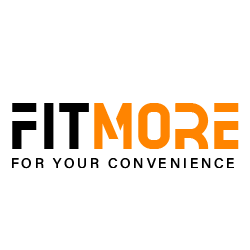
<style>
.page{position:relative;width:250px;height:250px;background:#ffffff}
.page>*{position:absolute;margin:0}
.t1{font:77.7px "ACETONE";color:#ff8400}
.t2{font:77.7px "ACETONE";color:#000000}
.t3{font:14px "AcuminConcept-Regular";letter-spacing:0.2em;color:#000000}
</style>
<div class="page">
<p class="t1" style="left:12px;top:103px;width:227px;height:46px"><span class="t2">FIT</span>MORE</p>
<p class="t3" style="left:12px;top:158px;width:222px;height:11px">FOR YOUR CONVENIENCE</p>
</div>
